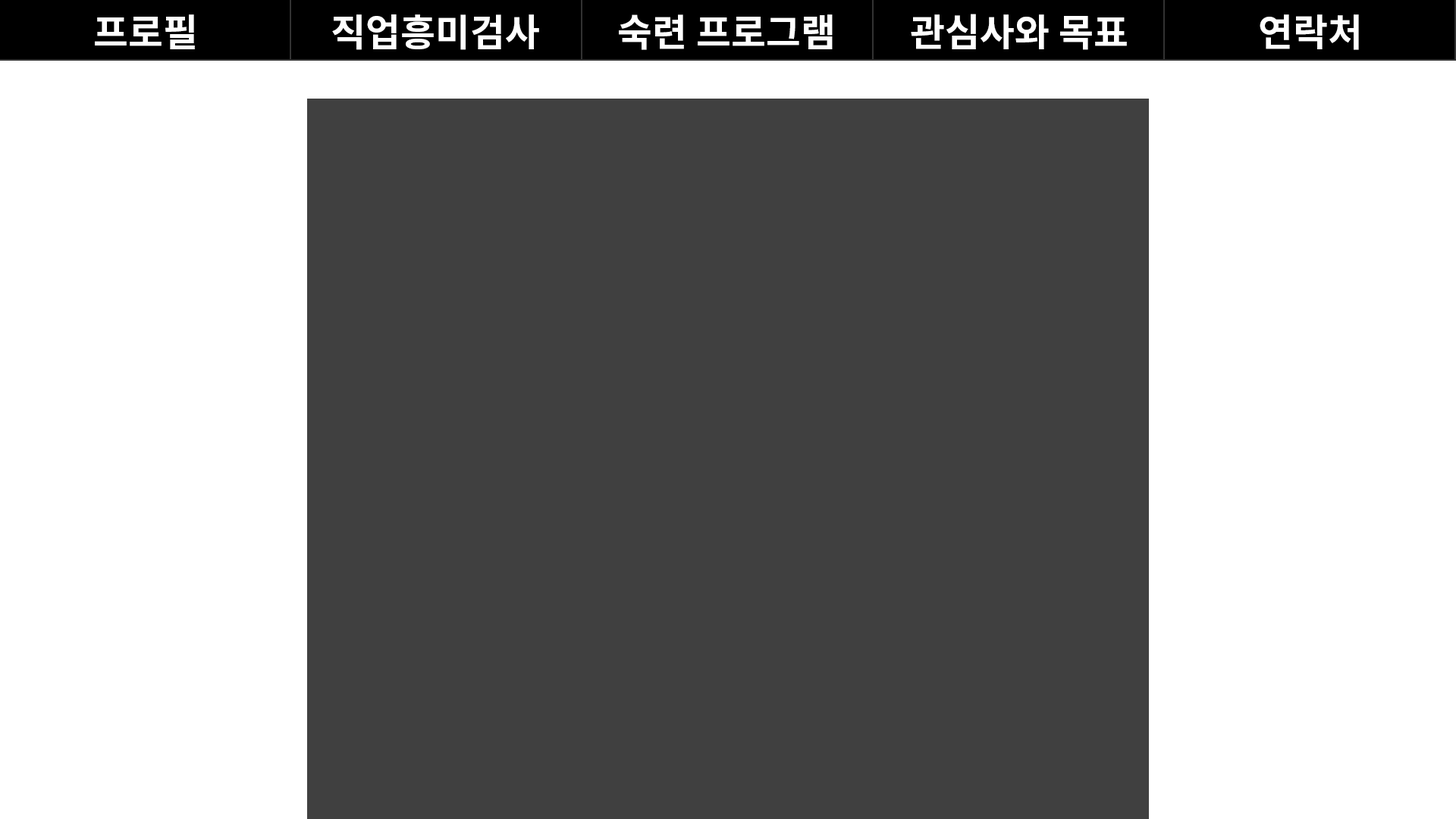
<style>
.page{position:relative;width:1456px;height:819px;background:#404040}
.page>*{position:absolute;margin:0}
.t1{font:37.9px "NotoSansKR-Bold";color:#ffffff}
</style>
<div class="page">
<p class="t1" style="left:95px;top:14px;width:100px;height:35px">프로필</p>
<p class="t1" style="left:332px;top:14px;width:207px;height:36px">직업흥미검사</p>
<p class="t1" style="left:619px;top:14px;width:214px;height:36px">숙련 프로그램</p>
<p class="t1" style="left:911px;top:14px;width:216px;height:36px">관심사와 목표</p>
<p class="t1" style="left:1260px;top:14px;width:99px;height:36px">연락처</p>
</div>
